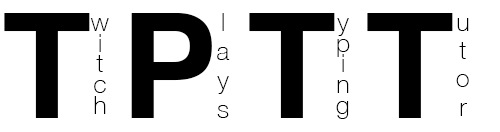
<style>
.page{position:relative;width:500px;height:132px;background:#ffffff}
.page>*{position:absolute;margin:0}
.t1{font:145.8px "Helvetica-Bold";letter-spacing:0.2em;color:#000000}
.t2{font:25px/29.2px "HelveticaNeue-Thin";letter-spacing:0.2em;color:#000000}
.t3{font:25px/20.9px "HelveticaNeue-Thin";letter-spacing:0.2em;color:#000000}
.t4{font:25px/20.8px "HelveticaNeue-Thin";letter-spacing:0.2em;color:#000000}
.t5{font:25px/28.3px "HelveticaNeue-Thin";letter-spacing:0.2em;color:#000000}
</style>
<div class="page">
<p class="t1" style="left:4px;top:13px;width:449px;height:105px">TPTT</p>
<p class="t2" style="left:217px;top:13px;width:13px;height:105px;text-align:center">l<br>a<br>y<br>s</p>
<p class="t3" style="left:90px;top:18px;width:19px;height:96px;text-align:center">w<br>i<br>t<br>c<br>h</p>
<p class="t4" style="left:336px;top:18px;width:14px;height:101px;text-align:center">y<br>p<br>i<br>n<br>g</p>
<p class="t5" style="left:456px;top:18px;width:13px;height:98px;text-align:center">u<br>t<br>o<br>r</p>
</div>
